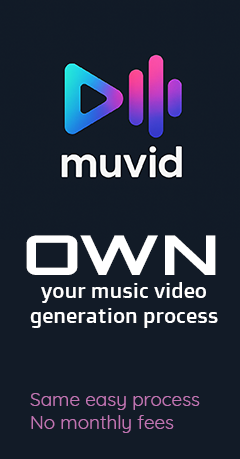
<style>
.page{position:relative;width:240px;height:459px;background:#121b27}
.page>*{position:absolute;margin:0}
.t1{font:54.8px "Orbitron-Bold";color:#ffffff;scale:1.28 1}
.t2{font:21px "DoppioOne-Regular";color:#ffffff}
.t3{font:19px "Quicksand-Regular";color:#c075b3}
</style>
<div class="page">
<p class="t1" style="left:26px;top:235px;width:190px;height:40px">OWN</p>
<p class="t2" style="left:30px;top:282px;width:188px;height:46px;text-align:center">your music video generation process</p>
<p class="t3" style="left:30px;top:393px;width:170px;height:40px">Same easy process<br>No monthly fees</p>
</div>
